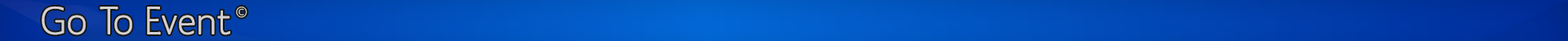
<style>
.page{position:relative;width:1568px;height:41px}
.page>*{position:absolute;margin:0}
.t1{font:39.2px "MankSans-Medium";color:#d2d0d0}
.t2{font:14.7px "MangaSpeak";color:#d2d0d0}
.t3{font:14.7px "MankSans";color:#d2d0d0}
</style>
<div class="page">
<p class="t1" style="left:42px;top:6px;width:188px;height:29px">Go To Event</p>
<p class="t2" style="left:236px;top:7px;width:11px;height:11px">⌐<span class="t3">©</span></p>
</div>
